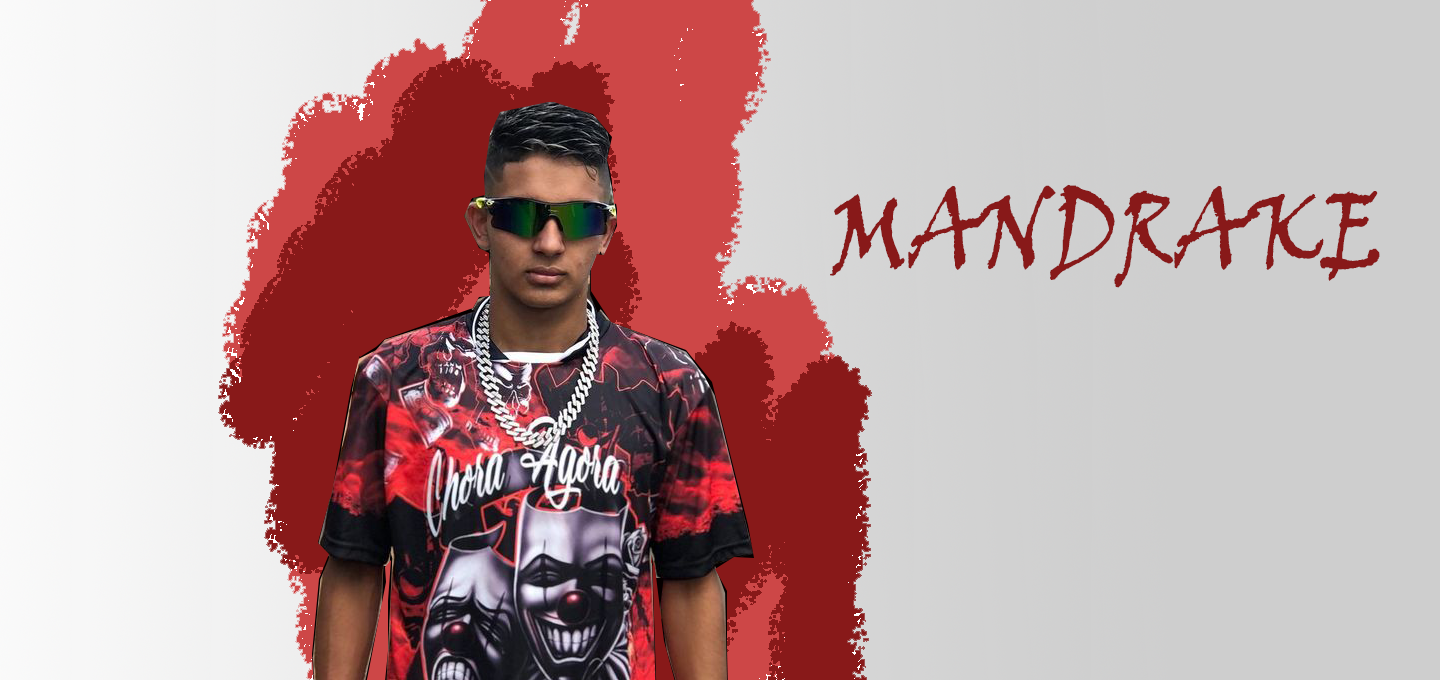
<style>
.page{position:relative;width:1440px;height:680px}
.page>*{position:absolute;margin:0}
.t1{font:105.8px "VinerHandITC";color:#881919;scale:0.83 1}
</style>
<div class="page">
<p class="t1" style="left:830px;top:184px;width:550px;height:104px">MANDRAKE</p>
</div>
